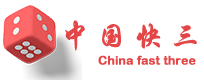
<style>
.page{position:relative;width:204px;height:80px;background:#ffffff}
.page>*{position:absolute;margin:0}
.t1{font:30px "STXingkai";letter-spacing:0.2em;color:#e44647;font-weight:bold}
.t2{font:12px "ArialRoundedMTBold";color:#e44647;font-weight:bold}
</style>
<div class="page">
<p class="t1" style="left:65px;top:20px;width:132px;height:31px">中国快三</p>
<p class="t2" style="left:98px;top:55px;width:98px;height:10px">China fast three</p>
</div>
